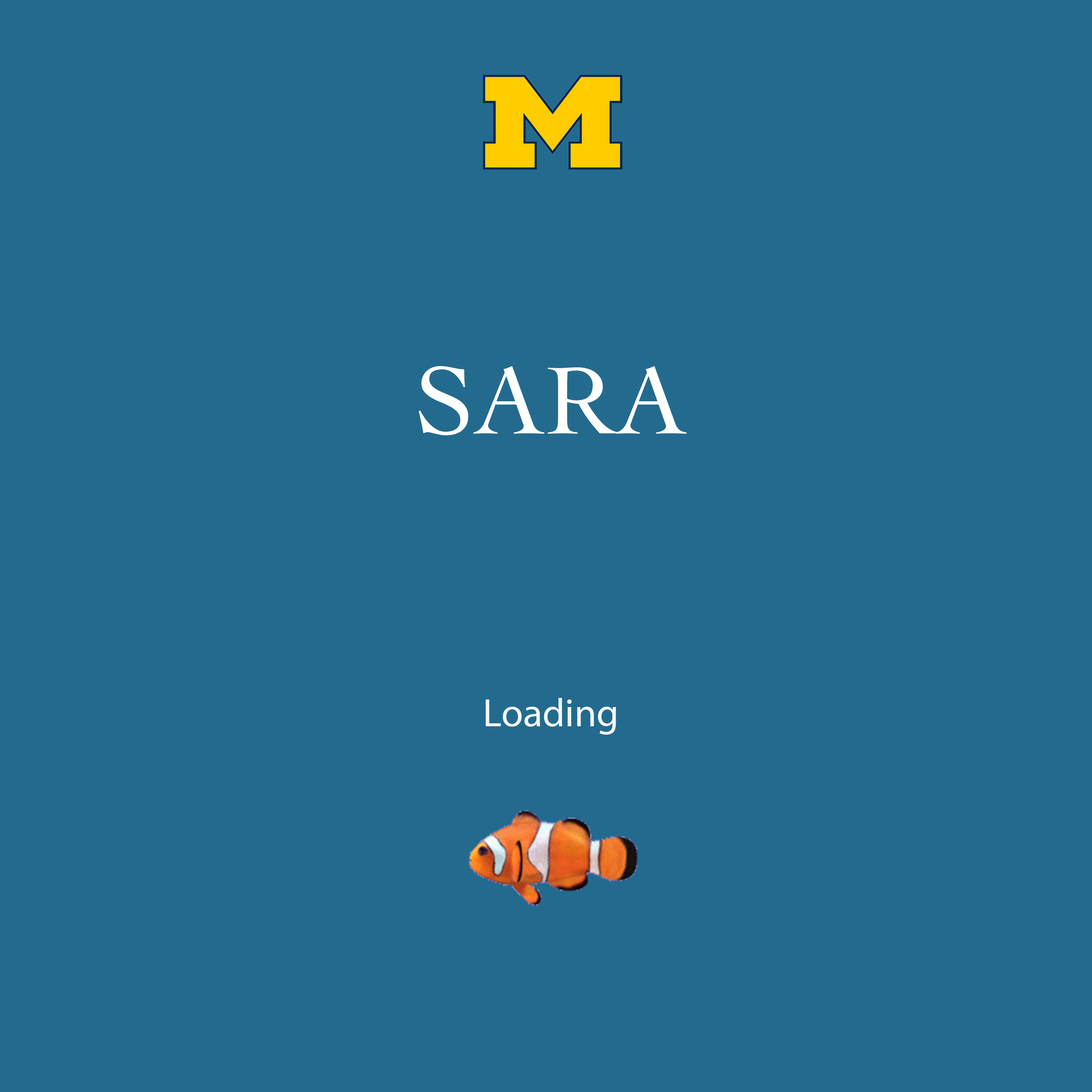
<style>
.page{position:relative;width:1092px;height:1092px;background:#236b8e}
.page>*{position:absolute;margin:0}
.t1{font:99.9px "Cochin";color:#ffffff}
.t2{font:40px "MyriadPro-Regular";color:#f3f7f9}
</style>
<div class="page">
<p class="t1" style="left:418px;top:366px;width:269px;height:69px">SARA</p>
<p class="t2" style="left:486px;top:698px;width:130px;height:37px">Loading</p>
</div>
